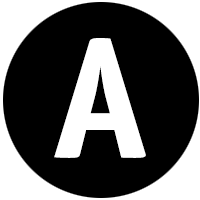
<style>
.page{position:relative;width:200px;height:200px;background:#000000}
.page>*{position:absolute;margin:0}
.t1{font:169.9px "YanoneKaffeesatz-Bold";color:#ffffff;scale:1.24 1}
</style>
<div class="page">
<p class="t1" style="left:54px;top:38px;width:92px;height:120px">A</p>
</div>
